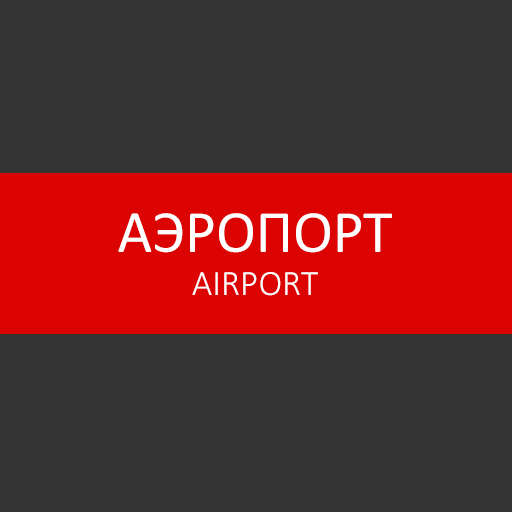
<style>
.page{position:relative;width:512px;height:512px;background:#333333}
.page>*{position:absolute;margin:0}
.t1{font:60px "Calibri";color:#ffffff}
.t2{font:36px "Calibri-Light";color:#ffffff}
</style>
<div class="page">
<p class="t1" style="left:118px;top:213px;width:274px;height:83px;text-align:center">АЭРОПОРТ<br><span class="t2">AIRPORT</span></p>
</div>
